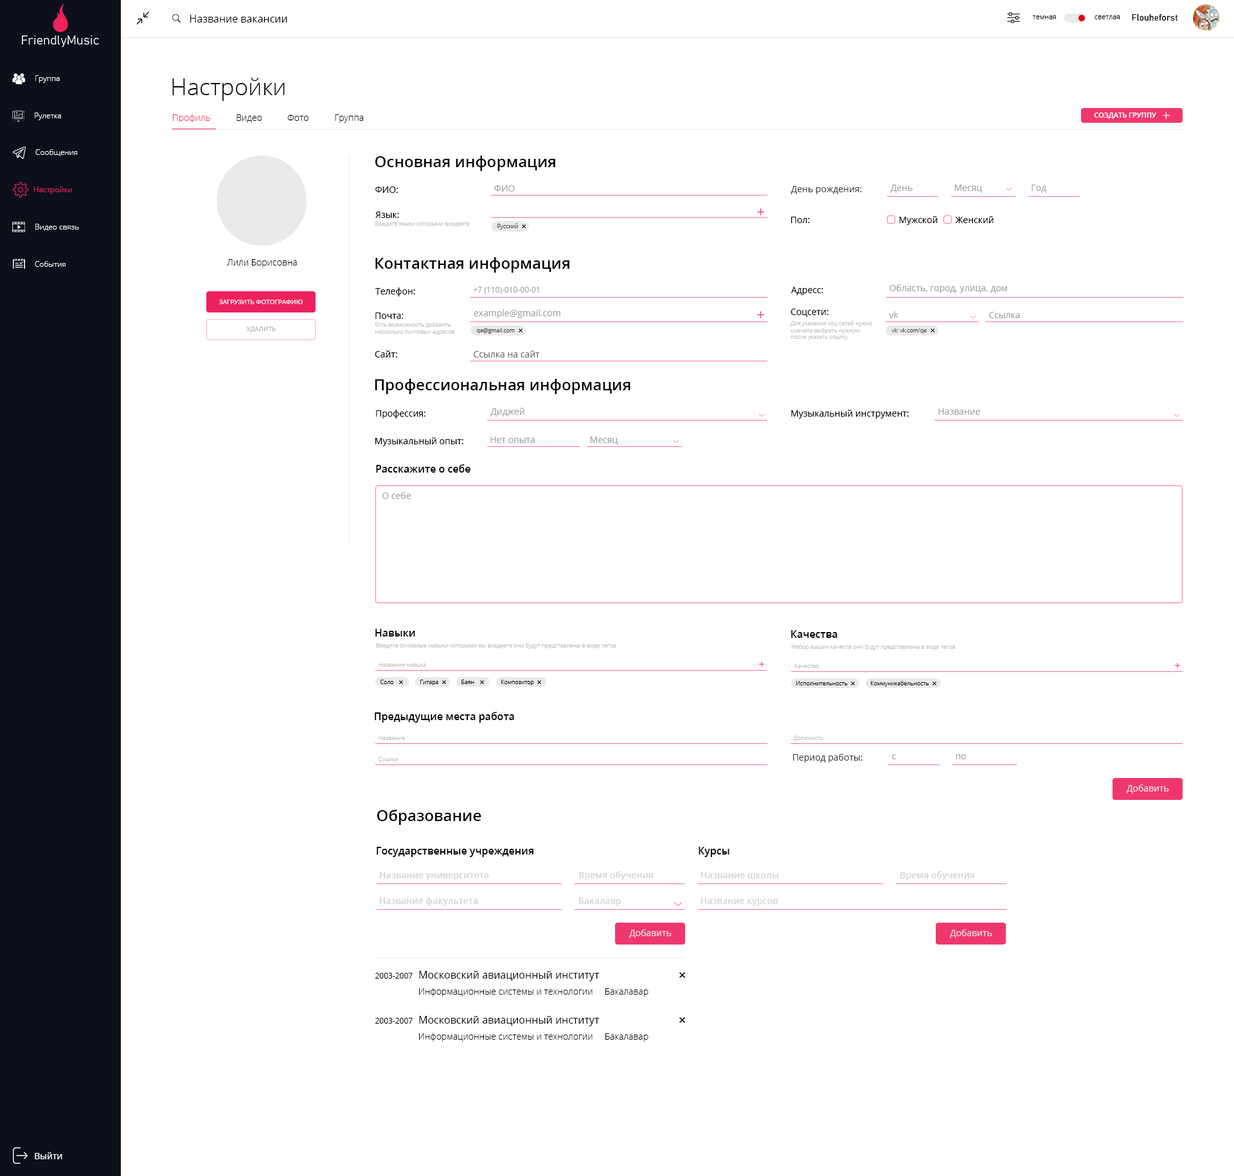
<style>
.page{position:relative;width:1234px;height:1176px;background:#ffffff}
.page>*{position:absolute;margin:0}
.t1{font:10.3px "OpenSans";color:#000000}
.t2{font:7.1px "OpenSans-Light";color:#000000}
.t3{font:9px "Bahnschrift";color:#000000}
.t4{font:7.7px "OpenSans-Light";color:#ffffff}
.t5{font:23.1px "OpenSans-Light";color:#000000}
.t6{font:9px "OpenSans-Light";color:#ef376e}
.t7{font:7.1px "OpenSans-Semibold";color:#ffffff;text-transform:uppercase}
.t8{font:9px "OpenSans-Light";color:#000000}
.t9{font:15.4px "OpenSans-Semibold";color:#000000}
.t10{font:9px "aakar-medium";color:#a2a2a2}
.t11{font:9px "aakar-medium";color:#404040}
.t12{font:7.7px "OpenSans-Light";color:#ed215e}
.t13{font:9px "aakar-medium";color:#000000}
.t14{font:5.8px "OpenSans-Light";color:#bfbfbf}
.t15{font:5.8px "OpenSans-Light";color:#424040}
.t16{font:7.7px "aakar-medium";color:#a2a2a2}
.t17{font:6.4px "OpenSans";color:#ffffff;text-transform:uppercase}
.t18{font:6.4px "OpenSans";color:#afb1b7;text-transform:uppercase}
.t19{font:9px "aakar-medium";color:#6b6b6b}
.t20{font:10.3px "OpenSans-Semibold";color:#000000}
.t21{font:9px "OpenSans";color:#a2a2a2}
.t22{font:5.8px "OpenSans-Light";color:#000000}
.t23{font:9px "OpenSans";color:#e6e6e6}
.t24{font:9px "OpenSans-Semibold";color:#d3d3d3}
.t25{font:7.7px "aakar-medium";color:#000000}
.t26{font:10.3px "aakar-medium";color:#000000}
.t27{font:9px "OpenSans";color:#ffffff}
</style>
<div class="page">
<p class="t1" style="left:190px;top:15px;width:97px;height:7px">Название вакансии</p>
<p class="t2" style="left:1032px;top:15px;width:24px;height:4px">темная</p>
<p class="t2" style="left:1095px;top:15px;width:25px;height:4px">светлая</p>
<p class="t3" style="left:1132px;top:14px;width:46px;height:7px">Flouheforst</p>
<p class="t4" style="left:35px;top:75px;width:25px;height:8px">Группа</p>
<p class="t5" style="left:172px;top:78px;width:113px;height:23px">Настройки</p>
<p class="t4" style="left:35px;top:113px;width:26px;height:7px">Рулетка</p>
<p class="t6" style="left:173px;top:114px;width:37px;height:9px">Профиль</p>
<p class="t7" style="left:1094px;top:113px;width:62px;height:6px">Создать группу</p>
<p class="t8" style="left:237px;top:114px;width:25px;height:9px">Видео</p>
<p class="t8" style="left:287px;top:114px;width:22px;height:7px">Фото</p>
<p class="t8" style="left:335px;top:114px;width:29px;height:9px">Группа</p>
<p class="t4" style="left:35px;top:149px;width:43px;height:7px">Сообщения</p>
<p class="t9" style="left:375px;top:156px;width:180px;height:15px">Основная информация</p>
<p class="t10" style="left:494px;top:185px;width:21px;height:7px">ФИО</p>
<p class="t11" style="left:791px;top:186px;width:71px;height:8px">День рождения:</p>
<p class="t10" style="left:890px;top:184px;width:23px;height:9px">День</p>
<p class="t10" style="left:955px;top:184px;width:27px;height:9px">Месяц</p>
<p class="t10" style="left:1032px;top:184px;width:15px;height:9px">Год</p>
<p class="t12" style="left:34px;top:186px;width:38px;height:8px">Настройки</p>
<p class="t13" style="left:375px;top:186px;width:23px;height:7px">ФИО:</p>
<p class="t13" style="left:375px;top:212px;width:24px;height:6px">Язык:</p>
<p class="t14" style="left:375px;top:221px;width:95px;height:6px">Введите языки которыми владеете</p>
<p class="t13" style="left:791px;top:217px;width:19px;height:6px">Пол:</p>
<p class="t13" style="left:899px;top:216px;width:39px;height:9px">Мужской</p>
<p class="t13" style="left:955px;top:216px;width:39px;height:7px">Женский</p>
<p class="t4" style="left:35px;top:224px;width:44px;height:7px">Видео связь</p>
<p class="t15" style="left:498px;top:223px;width:20px;height:7px">Русский</p>
<p class="t9" style="left:375px;top:257px;width:195px;height:16px">Контактная информация</p>
<p class="t4" style="left:35px;top:261px;width:31px;height:6px">События</p>
<p class="t8" style="left:227px;top:259px;width:70px;height:8px">Лили Борисовна</p>
<p class="t13" style="left:375px;top:287px;width:40px;height:9px">Телефон:</p>
<p class="t16" style="left:474px;top:287px;width:65px;height:7px">+7 (110)-010-00-01</p>
<p class="t13" style="left:791px;top:287px;width:33px;height:8px">Адресс:</p>
<p class="t10" style="left:890px;top:284px;width:117px;height:9px">Область, город, улица, дом</p>
<p class="t17" style="left:219px;top:300px;width:84px;height:4px">Загрузить фотографию</p>
<p class="t13" style="left:375px;top:312px;width:29px;height:7px">Почта:</p>
<p class="t10" style="left:474px;top:309px;width:87px;height:9px">example@gmail.com</p>
<p class="t13" style="left:791px;top:309px;width:38px;height:8px">Соцсети:</p>
<p class="t10" style="left:889px;top:311px;width:10px;height:7px">vk</p>
<p class="t10" style="left:989px;top:312px;width:31px;height:6px">Ссылка</p>
<p class="t18" style="left:246px;top:327px;width:30px;height:5px">Удалить</p>
<p class="t14" style="left:375px;top:322px;width:80px;height:13px">Есть возможность добавить <br>несколько почтовых адресов</p>
<p class="t15" style="left:476px;top:328px;width:39px;height:6px">qe@gmail.com</p>
<p class="t14" style="left:791px;top:320px;width:82px;height:20px">Для указания соц сетей нужно<br>сначала выбрать нужную<br>после указать ссылку</p>
<p class="t15" style="left:892px;top:328px;width:35px;height:6px">vk: vk.com/qe</p>
<p class="t13" style="left:375px;top:350px;width:22px;height:7px">Сайт:</p>
<p class="t19" style="left:474px;top:350px;width:66px;height:7px">Ссылка на сайт</p>
<p class="t9" style="left:375px;top:379px;width:256px;height:15px">Профессиональная информация</p>
<p class="t13" style="left:376px;top:410px;width:50px;height:9px">Профессия:</p>
<p class="t10" style="left:491px;top:408px;width:34px;height:9px">Диджей</p>
<p class="t13" style="left:791px;top:410px;width:118px;height:9px">Музыкальный инструмент:</p>
<p class="t10" style="left:939px;top:408px;width:41px;height:7px">Название</p>
<p class="t13" style="left:375px;top:437px;width:89px;height:9px">Музыкальный опыт:</p>
<p class="t10" style="left:491px;top:437px;width:44px;height:6px">Нет опыта</p>
<p class="t10" style="left:590px;top:437px;width:28px;height:8px">Месяц</p>
<p class="t20" style="left:376px;top:464px;width:95px;height:9px">Расскажите о себе</p>
<p class="t21" style="left:382px;top:492px;width:29px;height:7px">О себе</p>
<p class="t20" style="left:375px;top:629px;width:40px;height:7px">Навыки</p>
<p class="t20" style="left:791px;top:630px;width:47px;height:8px">Качества</p>
<p class="t14" style="left:376px;top:643px;width:240px;height:6px">Введите основные навыки которыми вы владеете они будут представлены в виде тегов</p>
<p class="t14" style="left:792px;top:644px;width:163px;height:6px">Набор выших качеств они будут представлены в виде тегов</p>
<p class="t14" style="left:379px;top:662px;width:47px;height:5px">Название навыка</p>
<p class="t14" style="left:795px;top:663px;width:25px;height:5px">Качество</p>
<p class="t22" style="left:381px;top:680px;width:13px;height:4px">Соло</p>
<p class="t22" style="left:420px;top:680px;width:18px;height:5px">Гитара</p>
<p class="t22" style="left:462px;top:680px;width:12px;height:4px">Баян</p>
<p class="t22" style="left:501px;top:680px;width:33px;height:5px">Композитор</p>
<p class="t22" style="left:797px;top:681px;width:51px;height:4px">Исполнительность</p>
<p class="t22" style="left:871px;top:681px;width:58px;height:6px">Коммуникабельность</p>
<p class="t20" style="left:375px;top:712px;width:139px;height:11px">Предыдущие места работа</p>
<p class="t14" style="left:379px;top:735px;width:26px;height:5px">Название</p>
<p class="t14" style="left:793px;top:735px;width:31px;height:6px">Должность</p>
<p class="t14" style="left:379px;top:757px;width:19px;height:4px">Ссылка</p>
<p class="t11" style="left:793px;top:753px;width:70px;height:9px">Период работы:</p>
<p class="t10" style="left:892px;top:754px;width:4px;height:5px">c</p>
<p class="t10" style="left:956px;top:754px;width:10px;height:5px">по</p>
<p class="t23" style="left:1127px;top:784px;width:42px;height:9px">Добавить</p>
<p class="t9" style="left:377px;top:809px;width:105px;height:16px">Образование</p>
<p class="t20" style="left:377px;top:847px;width:157px;height:10px">Государственные учреждения</p>
<p class="t20" style="left:699px;top:847px;width:31px;height:10px">Курсы</p>
<p class="t24" style="left:380px;top:872px;width:109px;height:8px">Название университета</p>
<p class="t24" style="left:579px;top:871px;width:74px;height:9px">Время обучения</p>
<p class="t24" style="left:701px;top:872px;width:78px;height:6px">Название школы</p>
<p class="t24" style="left:901px;top:871px;width:74px;height:9px">Время обучения</p>
<p class="t24" style="left:379px;top:897px;width:99px;height:9px">Название факультета</p>
<p class="t24" style="left:579px;top:897px;width:43px;height:9px">Бакалавр</p>
<p class="t24" style="left:701px;top:897px;width:77px;height:9px">Название курсов</p>
<p class="t23" style="left:629px;top:929px;width:43px;height:9px">Добавить</p>
<p class="t23" style="left:950px;top:929px;width:43px;height:9px">Добавить</p>
<p class="t25" style="left:375px;top:973px;width:38px;height:5px">2003-2007</p>
<p class="t26" style="left:419px;top:971px;width:181px;height:10px">Московский авиационный институт</p>
<p class="t8" style="left:419px;top:987px;width:174px;height:9px">Информационные системы и технологии</p>
<p class="t8" style="left:606px;top:988px;width:43px;height:8px">Бакалавар</p>
<p class="t25" style="left:375px;top:1018px;width:38px;height:5px">2003-2007</p>
<p class="t26" style="left:419px;top:1016px;width:181px;height:10px">Московский авиационный институт</p>
<p class="t8" style="left:419px;top:1032px;width:174px;height:9px">Информационные системы и технологии</p>
<p class="t8" style="left:606px;top:1033px;width:43px;height:8px">Бакалавар</p>
<p class="t27" style="left:35px;top:1152px;width:27px;height:7px">Выйти</p>
</div>
